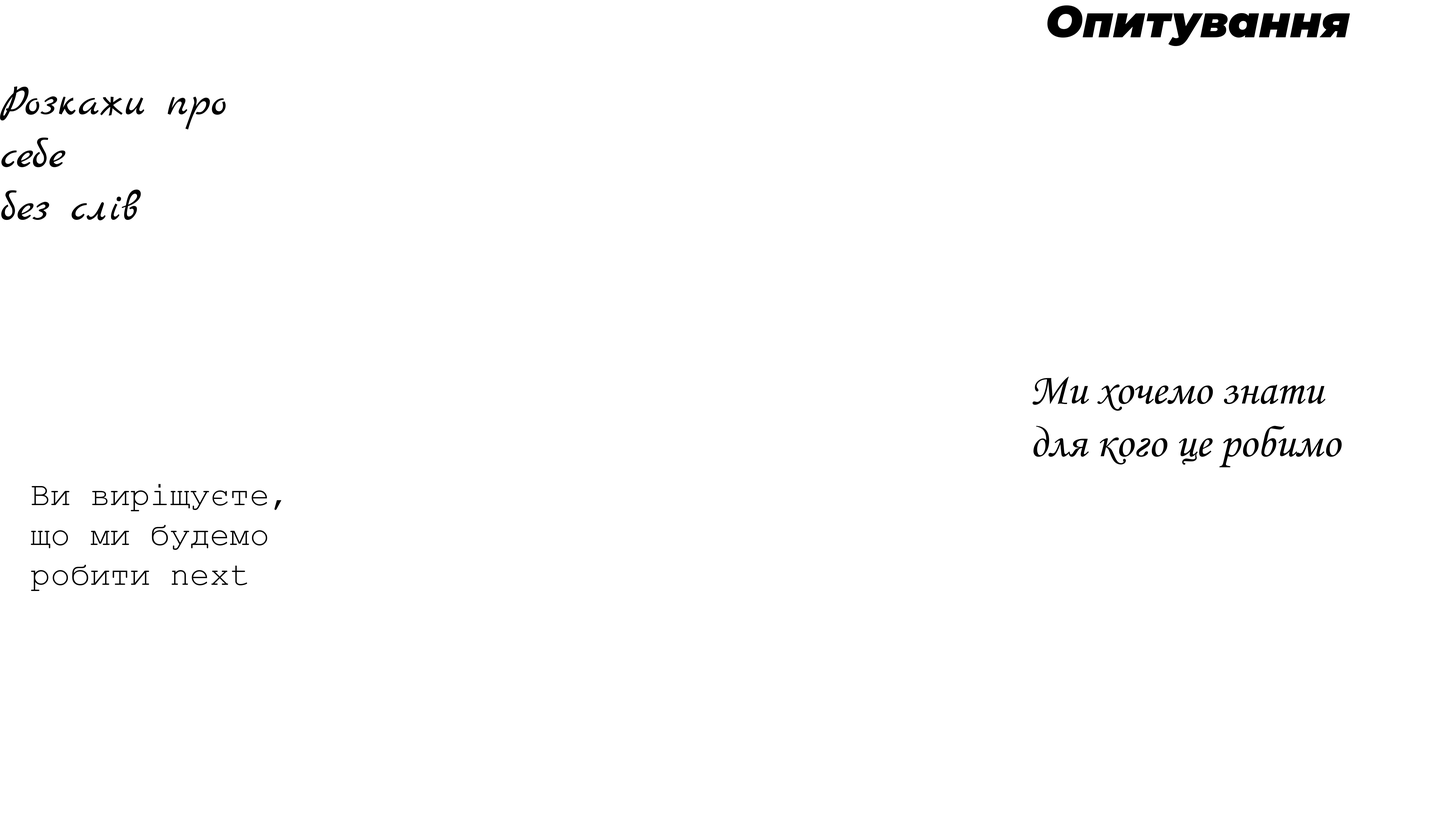
<style>
.page{position:relative;width:1446px;height:825px;background:#ffffff}
.page>*{position:absolute;margin:0}
.t1{font:43.9px "Montserrat-BlackItalic";color:#000000}
.t2{font:43.9px "MarckScript-Regular";color:#000000}
.t3{font:43.9px "MonotypeCorsiva";color:#000000}
.t4{font:33.2px "CourierNewPSMT";color:#000000}
</style>
<div class="page">
<p class="t1" style="left:1047px;top:5px;width:303px;height:41px">Опитування</p>
<p class="t2" style="left:0px;top:86px;width:226px;height:134px">Розкажи про <br>себе <br>без слів</p>
<p class="t3" style="left:1032px;top:376px;width:310px;height:91px">Ми хочемо знати <br>для кого це робимо</p>
<p class="t4" style="left:31px;top:484px;width:250px;height:107px">Ви виріщуєте, <br>що ми будемо <br>робити next</p>
</div>
